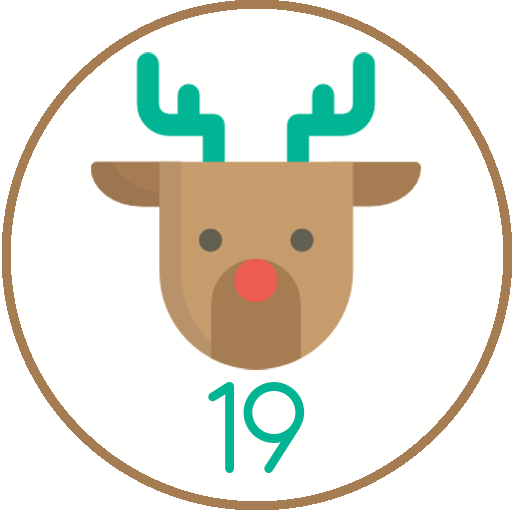
<style>
.page{position:relative;width:512px;height:512px;background:#fffffe}
.page>*{position:absolute;margin:0}
.t1{font:142.2px "Antipasto";color:#00b494}
</style>
<div class="page">
<p class="t1" style="left:208px;top:382px;width:97px;height:91px">19</p>
</div>
